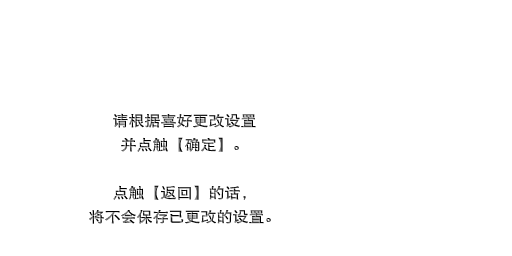
<style>
.page{position:relative;width:512px;height:256px;background:#ffffff}
.page>*{position:absolute;margin:0}
.t1{font:14.4px/24px "DFPHeiW5-GB";scale:1.11 1}
</style>
<div class="page">
<p class="t1" style="left:89px;top:113px;width:182px;height:111px;text-align:center">请根据喜好更改设置<br>并点触【确定】。<br><br>点触【返回】的话，<br>将不会保存已更改的设置。</p>
</div>
